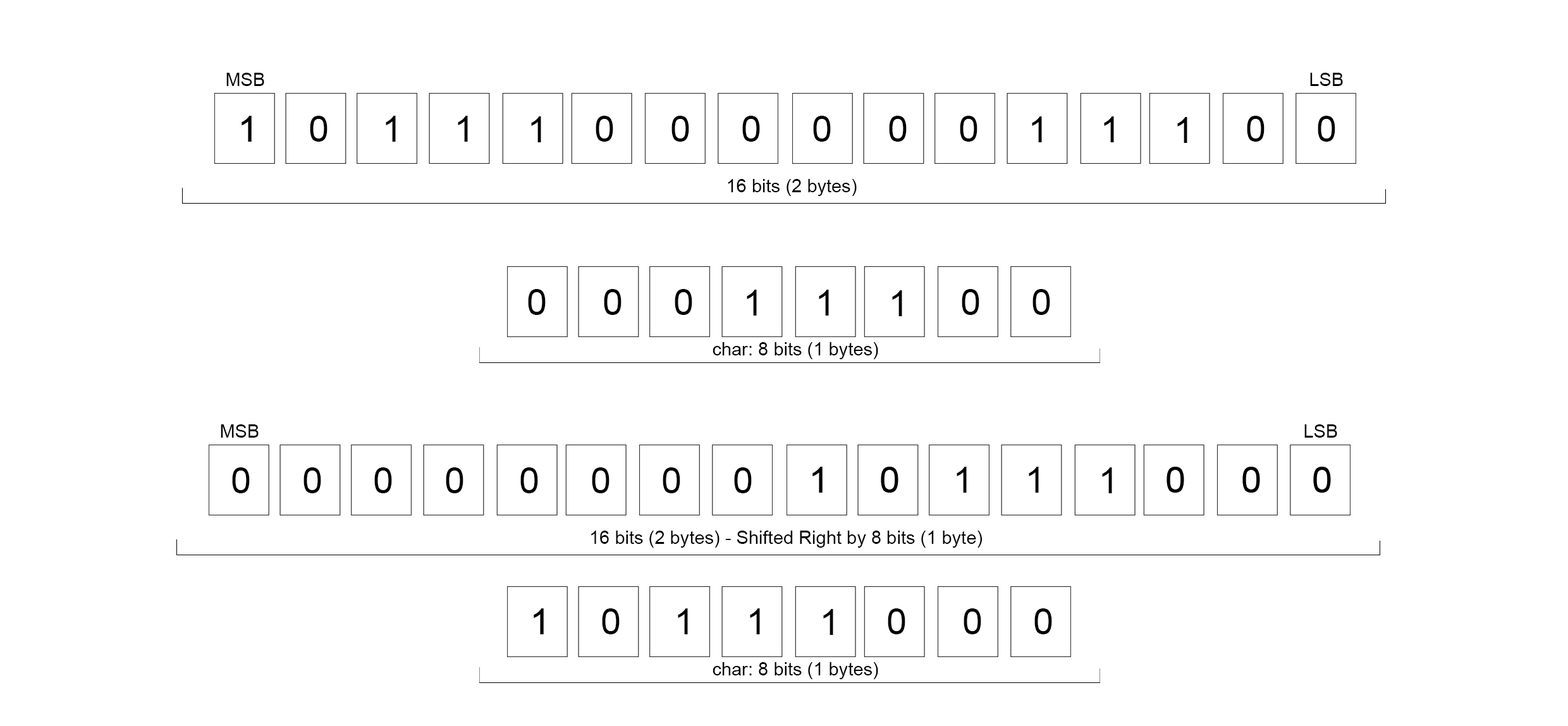
<style>
.page{position:relative;width:1568px;height:726px;background:#ffffff}
.page>*{position:absolute;margin:0}
.t1{font:18.4px "ArialMT";color:#000000}
.t2{font:36.8px "ArialMT";color:#000000}
</style>
<div class="page">
<p class="t1" style="left:226px;top:73px;width:38px;height:13px">MSB</p>
<p class="t1" style="left:1310px;top:73px;width:33px;height:13px">LSB</p>
<p class="t2" style="left:242px;top:116px;width:10px;height:26px">1</p>
<p class="t2" style="left:242px;top:116px;width:10px;height:26px">1</p>
<p class="t2" style="left:310px;top:116px;width:18px;height:26px">0</p>
<p class="t2" style="left:386px;top:116px;width:10px;height:26px">1</p>
<p class="t2" style="left:458px;top:116px;width:10px;height:26px">1</p>
<p class="t2" style="left:531px;top:116px;width:10px;height:26px">1</p>
<p class="t2" style="left:596px;top:116px;width:17px;height:26px">0</p>
<p class="t2" style="left:671px;top:116px;width:18px;height:26px">0</p>
<p class="t2" style="left:742px;top:116px;width:18px;height:26px">0</p>
<p class="t2" style="left:813px;top:116px;width:18px;height:26px">0</p>
<p class="t2" style="left:889px;top:116px;width:18px;height:26px">0</p>
<p class="t2" style="left:960px;top:116px;width:17px;height:26px">0</p>
<p class="t2" style="left:1032px;top:116px;width:10px;height:26px">1</p>
<p class="t2" style="left:1104px;top:116px;width:10px;height:26px">1</p>
<p class="t2" style="left:1177px;top:117px;width:10px;height:26px">1</p>
<p class="t2" style="left:1247px;top:116px;width:18px;height:26px">0</p>
<p class="t2" style="left:1318px;top:116px;width:17px;height:26px">0</p>
<p class="t1" style="left:728px;top:179px;width:129px;height:17px">16 bits (2 bytes)</p>
<p class="t2" style="left:528px;top:289px;width:18px;height:26px">0</p>
<p class="t2" style="left:604px;top:289px;width:18px;height:26px">0</p>
<p class="t2" style="left:675px;top:289px;width:17px;height:26px">0</p>
<p class="t2" style="left:747px;top:290px;width:10px;height:25px">1</p>
<p class="t2" style="left:819px;top:290px;width:10px;height:25px">1</p>
<p class="t2" style="left:892px;top:290px;width:10px;height:26px">1</p>
<p class="t2" style="left:962px;top:289px;width:17px;height:26px">0</p>
<p class="t2" style="left:1032px;top:289px;width:18px;height:26px">0</p>
<p class="t1" style="left:713px;top:342px;width:165px;height:17px">char: 8 bits (1 bytes)</p>
<p class="t1" style="left:221px;top:424px;width:38px;height:14px">MSB</p>
<p class="t1" style="left:1304px;top:424px;width:33px;height:14px">LSB</p>
<p class="t2" style="left:232px;top:467px;width:18px;height:26px">0</p>
<p class="t2" style="left:303px;top:467px;width:18px;height:26px">0</p>
<p class="t2" style="left:374px;top:467px;width:18px;height:26px">0</p>
<p class="t2" style="left:446px;top:467px;width:17px;height:26px">0</p>
<p class="t2" style="left:520px;top:467px;width:18px;height:26px">0</p>
<p class="t2" style="left:592px;top:467px;width:17px;height:26px">0</p>
<p class="t2" style="left:663px;top:467px;width:17px;height:26px">0</p>
<p class="t2" style="left:734px;top:467px;width:18px;height:26px">0</p>
<p class="t2" style="left:812px;top:467px;width:11px;height:26px">1</p>
<p class="t2" style="left:812px;top:467px;width:11px;height:26px">1</p>
<p class="t2" style="left:881px;top:467px;width:17px;height:26px">0</p>
<p class="t2" style="left:881px;top:467px;width:17px;height:26px">0</p>
<p class="t2" style="left:957px;top:467px;width:10px;height:26px">1</p>
<p class="t2" style="left:1029px;top:467px;width:10px;height:26px">1</p>
<p class="t2" style="left:1102px;top:467px;width:10px;height:26px">1</p>
<p class="t2" style="left:1167px;top:467px;width:17px;height:26px">0</p>
<p class="t2" style="left:1167px;top:467px;width:17px;height:26px">0</p>
<p class="t2" style="left:1242px;top:467px;width:18px;height:26px">0</p>
<p class="t2" style="left:1242px;top:467px;width:18px;height:26px">0</p>
<p class="t2" style="left:1313px;top:467px;width:18px;height:26px">0</p>
<p class="t2" style="left:1313px;top:467px;width:18px;height:26px">0</p>
<p class="t1" style="left:591px;top:530px;width:392px;height:18px">16 bits (2 bytes) - Shifted Right by 8 bits (1 byte)</p>
<p class="t2" style="left:534px;top:608px;width:10px;height:26px">1</p>
<p class="t2" style="left:534px;top:608px;width:10px;height:26px">1</p>
<p class="t2" style="left:602px;top:608px;width:18px;height:26px">0</p>
<p class="t2" style="left:678px;top:608px;width:10px;height:26px">1</p>
<p class="t2" style="left:750px;top:608px;width:10px;height:26px">1</p>
<p class="t2" style="left:823px;top:609px;width:10px;height:26px">1</p>
<p class="t2" style="left:888px;top:608px;width:17px;height:26px">0</p>
<p class="t2" style="left:964px;top:608px;width:17px;height:26px">0</p>
<p class="t2" style="left:1034px;top:608px;width:18px;height:26px">0</p>
<p class="t1" style="left:713px;top:662px;width:165px;height:17px">char: 8 bits (1 bytes)</p>
</div>
